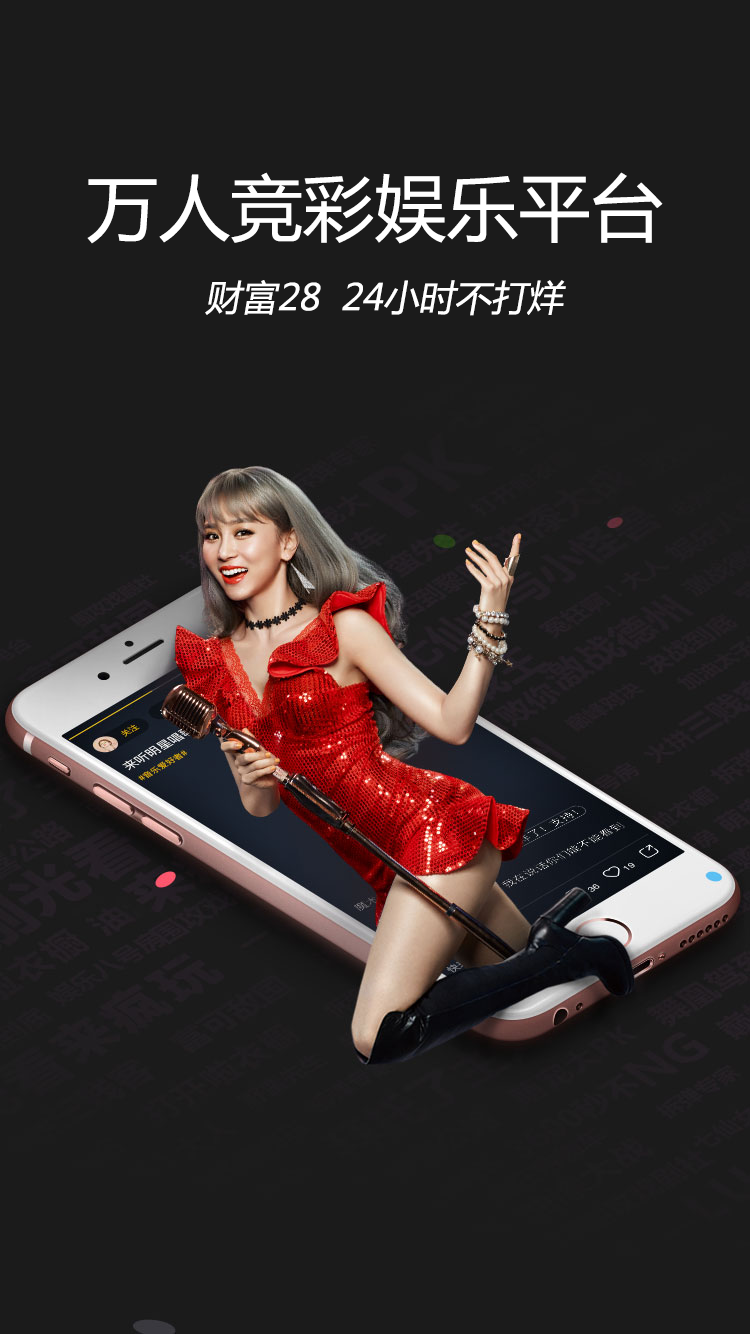
<style>
.page{position:relative;width:750px;height:1334px;background:#1b1b1b}
.page>*{position:absolute;margin:0}
.t1{font:72px "MicrosoftYaHei";color:#ffffff}
.t2{font:36px "MicrosoftYaHei";color:#ffffff;font-style:italic}
</style>
<div class="page">
<p class="t1" style="left:87px;top:172px;width:576px;height:72px">万人竞彩娱乐平台</p>
<p class="t2" style="left:205px;top:280px;width:361px;height:36px">财富28  24小时不打烊</p>
</div>
